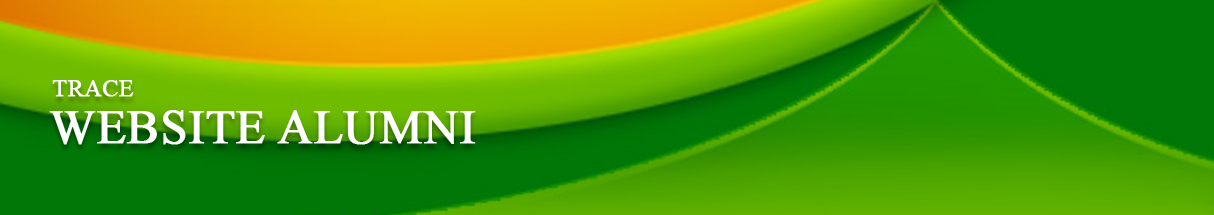
<style>
.page{position:relative;width:1214px;height:215px}
.page>*{position:absolute;margin:0}
.t1{font:24px "TimesNewRomanPSMT";color:#ffffff;font-weight:bold}
.t2{font:48px "TimesNewRomanPSMT";color:#ffffff;font-weight:bold}
</style>
<div class="page">
<p class="t1" style="left:52px;top:80px;width:82px;height:17px">TRACE</p>
<p class="t2" style="left:49px;top:110px;width:427px;height:35px">WEBSITE ALUMNI</p>
</div>
